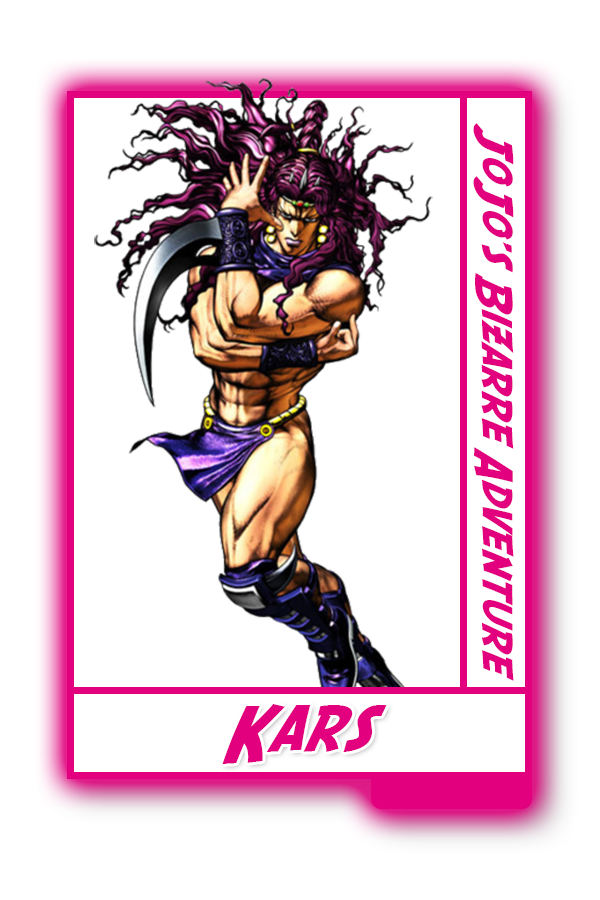
<style>
.page{position:relative;width:600px;height:900px;background:#ffffff}
.page>*{position:absolute;margin:0}
.t1{font:42.4px "SFFedora";color:#e3007e}
.t2{font:65.2px "SFFedora";color:#e3007e}
</style>
<div class="page">
<p class="t1" style="left:473px;top:123px;width:41px;height:558px;rotate:90deg">JoJo's Bizarre Adventure</p>
<p class="t2" style="left:222px;top:704px;width:165px;height:60px">Kars</p>
</div>
